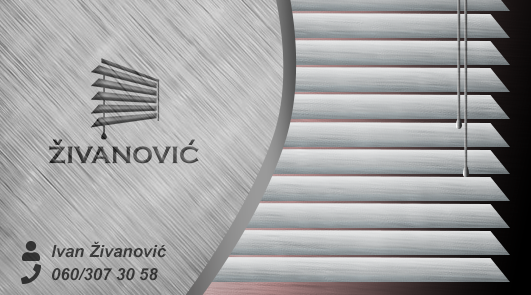
<style>
.page{position:relative;width:531px;height:295px}
.page>*{position:absolute;margin:0}
.t1{font:16.7px "Arial-BoldItalicMT";color:#3b3b3b}
.t2{font:16.7px "Arial-BoldItalicMT";color:#373737}
</style>
<div class="page">
<p class="t1" style="left:51px;top:241px;width:115px;height:17px">Ivan Živanović</p>
<p class="t2" style="left:52px;top:268px;width:106px;height:13px">060/307 30 58</p>
</div>
